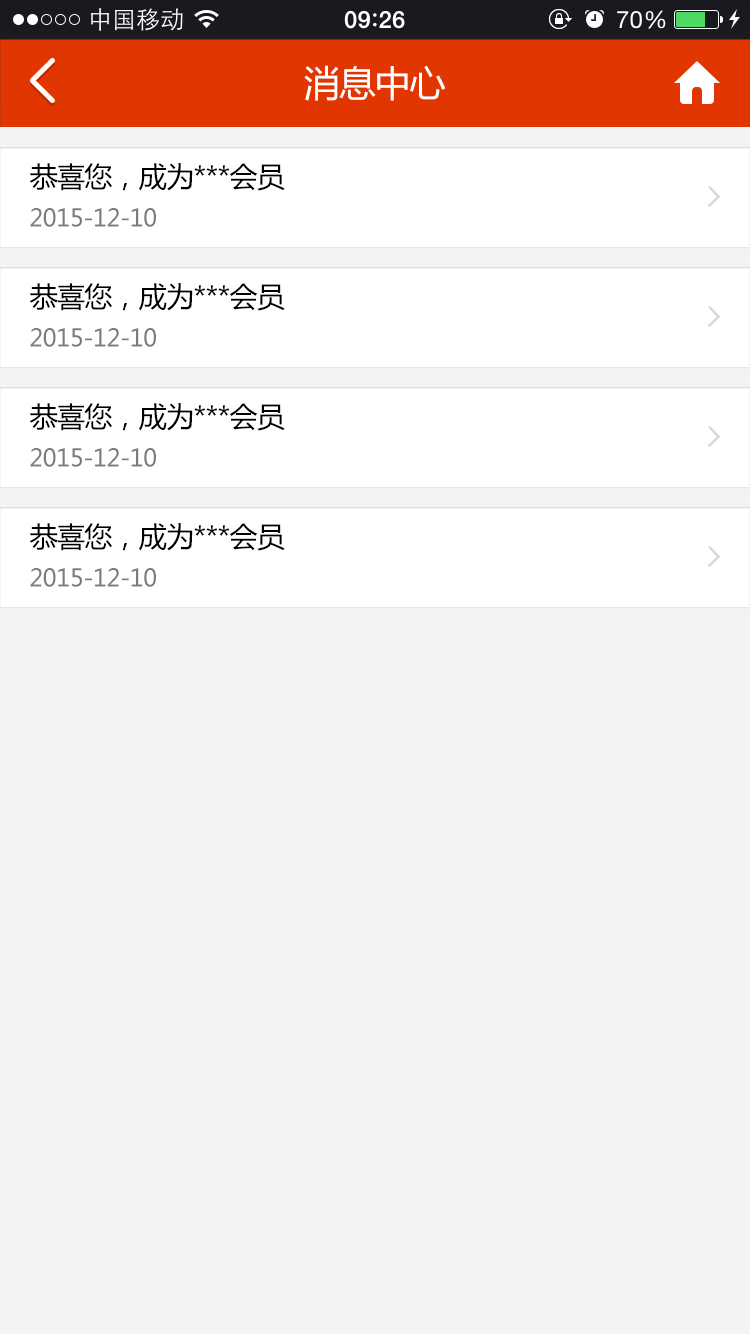
<style>
.page{position:relative;width:750px;height:1334px;background:#f2f3f5}
.page>*{position:absolute;margin:0}
.t1{font:36px "MicrosoftYaHei";letter-spacing:-0.025em;color:#ffffff}
.t2{font:28px "MicrosoftYaHei";letter-spacing:-0.025em;color:#000000}
.t3{font:24px "MicrosoftYaHei";letter-spacing:-0.025em;color:#7c7c7c}
</style>
<div class="page">
<p class="t1" style="left:304px;top:65px;width:142px;height:36px">消息中心</p>
<p class="t2" style="left:29px;top:163px;width:256px;height:28px">恭喜您，成为***会员</p>
<p class="t3" style="left:30px;top:208px;width:126px;height:19px">2015-12-10</p>
<p class="t2" style="left:29px;top:283px;width:256px;height:28px">恭喜您，成为***会员</p>
<p class="t3" style="left:30px;top:328px;width:126px;height:19px">2015-12-10</p>
<p class="t2" style="left:29px;top:403px;width:256px;height:28px">恭喜您，成为***会员</p>
<p class="t3" style="left:30px;top:448px;width:126px;height:19px">2015-12-10</p>
<p class="t2" style="left:29px;top:523px;width:256px;height:28px">恭喜您，成为***会员</p>
<p class="t3" style="left:30px;top:568px;width:126px;height:19px">2015-12-10</p>
</div>
